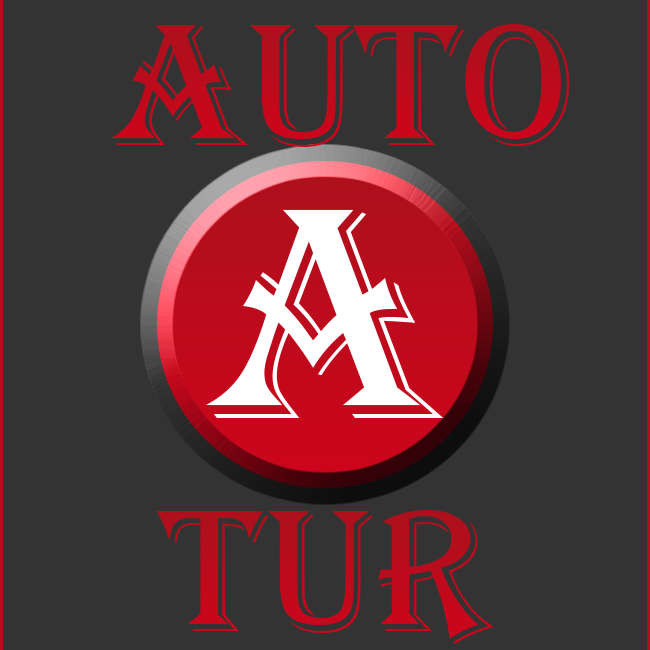
<style>
.page{position:relative;width:650px;height:650px;background:#333333}
.page>*{position:absolute;margin:0}
.t1{font:180px "Algerian";color:#bc0b1c}
.t2{font:180px "Algerian";color:#b90c1c}
</style>
<div class="page">
<p class="t1" style="left:111px;top:24px;width:459px;height:123px">AUTO</p>
<p class="t2" style="left:156px;top:510px;width:338px;height:134px">TUR</p>
</div>
